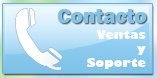
<style>
.page{position:relative;width:157px;height:78px}
.page>*{position:absolute;margin:0}
.t1{font:21px "FranklinGothic-Heavy";color:#7fc3e9}
.t2{font:12px "GillSans-UltraBold";color:#ffffff}
</style>
<div class="page">
<p class="t1" style="left:57px;top:9px;width:90px;height:14px">Contacto</p>
<p class="t2" style="left:86px;top:30px;width:60px;height:39px;text-align:right">Ventas<br>y<br>Soporte</p>
</div>
